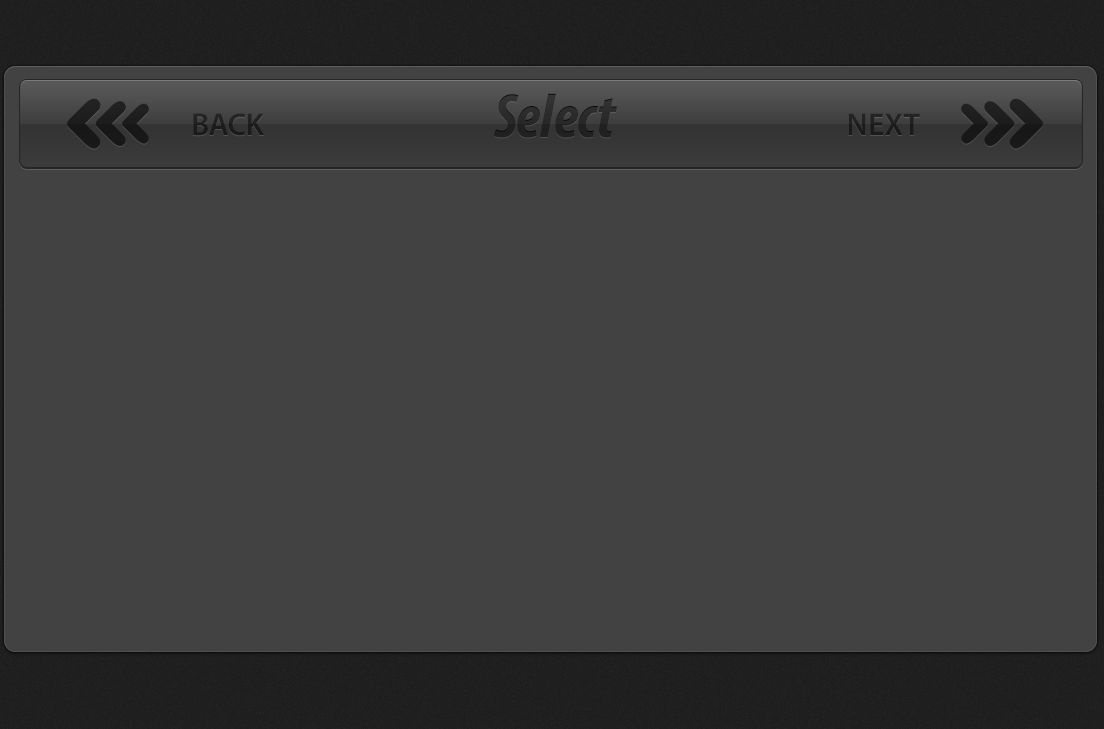
<style>
.page{position:relative;width:1104px;height:729px;background:#424242}
.page>*{position:absolute;margin:0}
.t1{font:62.5px "MyriadPro-BoldCondIt";color:#282828}
.t2{font:31.6px "MyriadPro-Semibold";color:#1b1b1b}
.t3{font:31.6px "MyriadPro-Semibold";color:#202122}
</style>
<div class="page">
<p class="t1" style="left:494px;top:93px;width:123px;height:45px">Select</p>
<p class="t2" style="left:193px;top:113px;width:72px;height:23px">BACK</p>
<p class="t3" style="left:848px;top:113px;width:72px;height:22px">NEXT</p>
</div>
